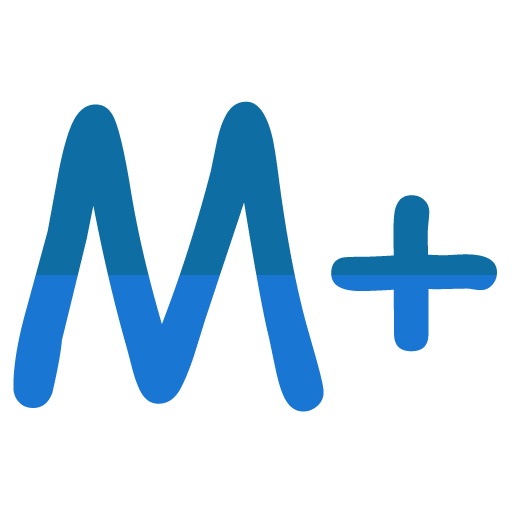
<style>
.page{position:relative;width:512px;height:512px;background:#ffffff}
.page>*{position:absolute;margin:0}
.t1{font:391.9px "ComicSansMS";letter-spacing:-0.04em}
</style>
<div class="page">
<p class="t1" style="left:13px;top:101px;width:484px;height:311px">M+</p>
</div>
